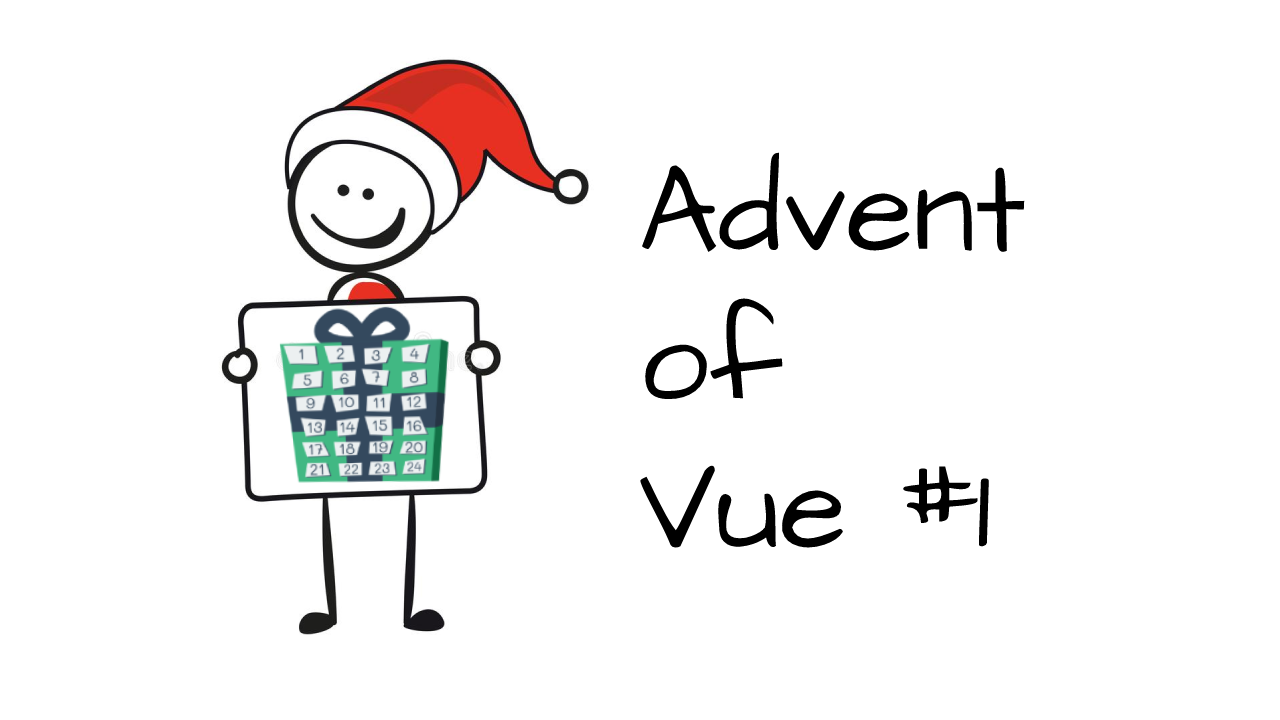
<style>
.page{position:relative;width:1280px;height:720px;background:#ffffff}
.page>*{position:absolute;margin:0}
.t1{font:124px "ArchitectsDaughter-Regular";color:#000000}
</style>
<div class="page">
<p class="t1" style="left:640px;top:152px;width:385px;height:398px">Advent <br>of <br>Vue #1</p>
</div>
